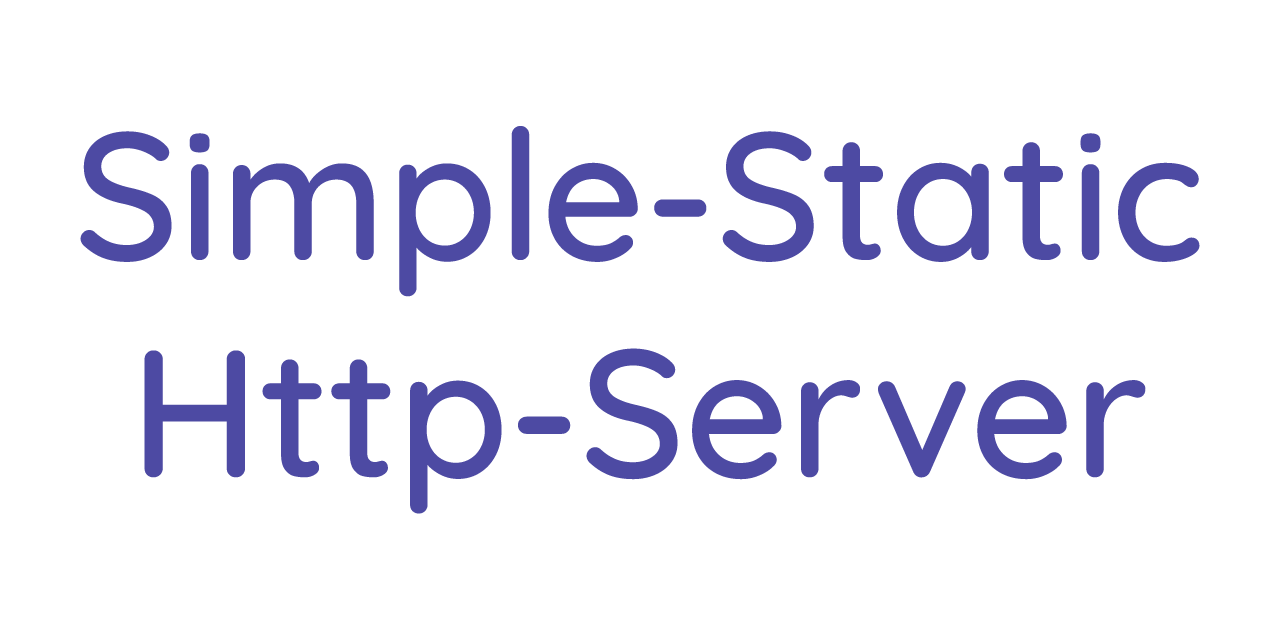
<style>
.page{position:relative;width:1280px;height:640px;background:#ffffff}
.page>*{position:absolute;margin:0}
.t1{font:181px "Quicksand-Medium";color:#4d4aa3}
</style>
<div class="page">
<p class="t1" style="left:80px;top:126px;width:1120px;height:388px;text-align:center">Simple-Static<br>Http-Server</p>
</div>
